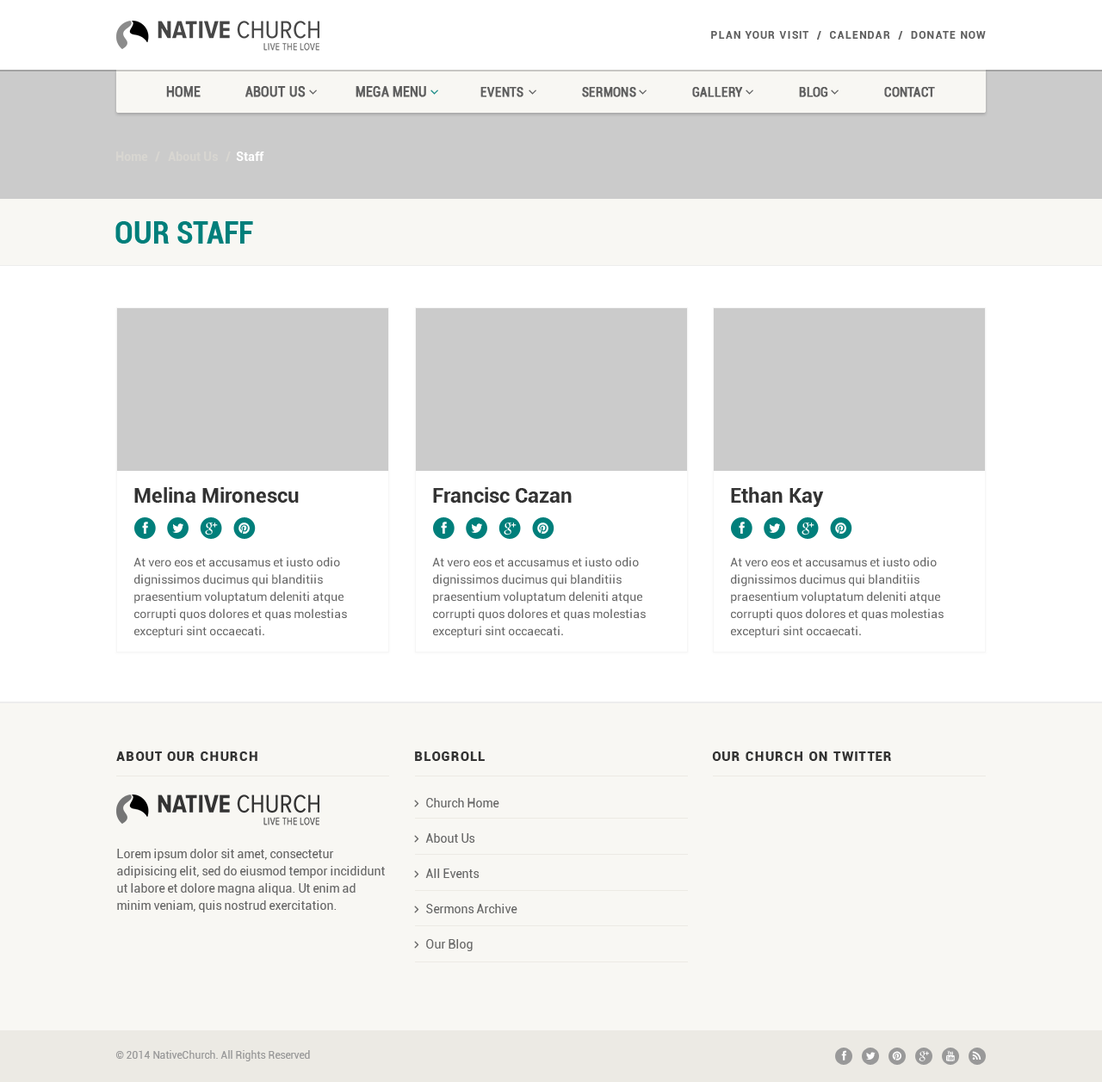
<style>
.page{position:relative;width:1102px;height:1082px;background:#f8f7f3}
.page>*{position:absolute;margin:0}
.t1{font:10.3px "Roboto-Bold";letter-spacing:0.1em;color:#5e5e5e}
.t2{font:12.1px "Roboto-Bold";color:#d8d6d1}
.t3{font:12.1px "Roboto-Bold";color:#ffffff}
.t4{font:31px "Roboto-BoldCondensed";color:#007f7b}
.t5{font:20.7px "Roboto-Bold";color:#333333}
.t6{font:12.1px/17.2px "Roboto-Regular";color:#666666}
.t7{font:12.9px "Roboto-Black";letter-spacing:0.075em;color:#333333}
.t8{font:10.3px "Roboto-Regular";color:#999999}
</style>
<div class="page">
<p class="t1" style="left:711px;top:31px;width:275px;height:9px">PLAN YOUR VISIT  /  CALENDAR  /  DONATE NOW</p>
<p class="t2" style="left:116px;top:152px;width:148px;height:10px">Home   /   About Us   /<span class="t3">  Staff</span></p>
<p class="t4" style="left:115px;top:221px;width:138px;height:23px">OUR STAFF</p>
<p class="t5" style="left:134px;top:487px;width:165px;height:16px">Melina Mironescu</p>
<p class="t5" style="left:433px;top:487px;width:139px;height:16px">Francisc Cazan</p>
<p class="t5" style="left:731px;top:487px;width:93px;height:20px">Ethan Kay</p>
<p class="t6" style="left:133px;top:557px;width:214px;height:81px">At vero eos et accusamus et iusto odio dignissimos ducimus qui blanditiis praesentium voluptatum deleniti atque corrupti quos dolores et quas molestias excepturi sint occaecati.</p>
<p class="t6" style="left:432px;top:557px;width:214px;height:81px">At vero eos et accusamus et iusto odio dignissimos ducimus qui blanditiis praesentium voluptatum deleniti atque corrupti quos dolores et quas molestias excepturi sint occaecati.</p>
<p class="t6" style="left:730px;top:557px;width:214px;height:81px">At vero eos et accusamus et iusto odio dignissimos ducimus qui blanditiis praesentium voluptatum deleniti atque corrupti quos dolores et quas molestias excepturi sint occaecati.</p>
<p class="t7" style="left:116px;top:752px;width:141px;height:9px">ABOUT OUR CHURCH</p>
<p class="t7" style="left:415px;top:752px;width:70px;height:9px">BLOGROLL</p>
<p class="t7" style="left:712px;top:752px;width:179px;height:9px">OUR CHURCH ON TWITTER</p>
<p class="t6" style="left:117px;top:849px;width:268px;height:64px">Lorem ipsum dolor sit amet, consectetur adipisicing elit, sed do eiusmod tempor incididunt ut labore et dolore magna aliqua. Ut enim ad minim veniam, quis nostrud exercitation.</p>
<p class="t8" style="left:115px;top:1050px;width:195px;height:11px">© 2014 NativeChurch. All Rights Reserved</p>
</div>
